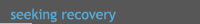
<style>
.page{position:relative;width:200px;height:24px;background:#575758}
.page>*{position:absolute;margin:0}
.t1{font:14px "TrebuchetMS";color:#53aad5}
</style>
<div class="page">
<p class="t1" style="left:10px;top:8px;width:106px;height:15px">seeking recovery</p>
</div>
